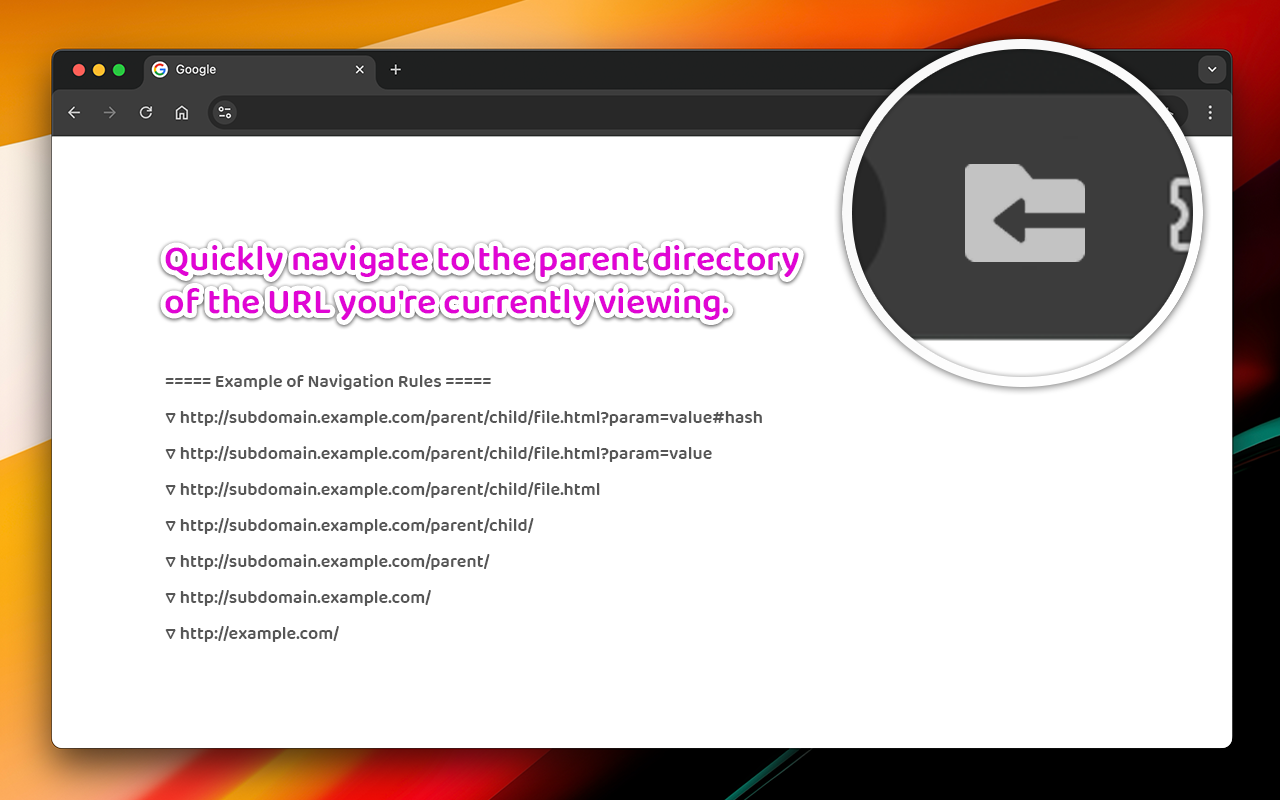
<style>
.page{position:relative;width:1280px;height:800px;background:#ffffff}
.page>*{position:absolute;margin:0}
.t1{font:36px "BalooBhai2-SemiBold";color:#e000d3}
.t2{font:18px/36px "BalooBhai2-SemiBold";color:#565656}
</style>
<div class="page">
<p class="t1" style="left:165px;top:245px;width:634px;height:75px">Quickly navigate to the parent directory<br>of the URL you're currently viewing.</p>
<p class="t2" style="left:165px;top:374px;width:597px;height:268px">===== Example of Navigation Rules =====<br>▽ http://subdomain.example.com/parent/child/file.html?param=value#hash<br>▽ http://subdomain.example.com/parent/child/file.html?param=value<br>▽ http://subdomain.example.com/parent/child/file.html<br>▽ http://subdomain.example.com/parent/child/<br>▽ http://subdomain.example.com/parent/<br>▽ http://subdomain.example.com/<br>▽ http://example.com/</p>
</div>
